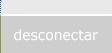
<style>
.page{position:relative;width:112px;height:53px;background:#cecece}
.page>*{position:absolute;margin:0}
.t1{font:14px "Verdana";color:#ffffff}
</style>
<div class="page">
<p class="t1" style="left:14px;top:29px;width:84px;height:12px">desconectar</p>
</div>
